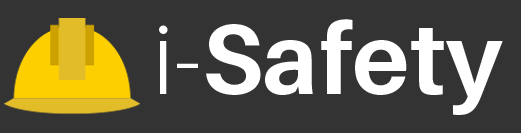
<style>
.page{position:relative;width:521px;height:133px;background:#333333}
.page>*{position:absolute;margin:0}
.t1{font:100px "Aileron-Bold";color:#ffffff}
.t2{font:100px "Aileron-Light";color:#ffffff}
</style>
<div class="page">
<p class="t1" style="left:159px;top:19px;width:344px;height:96px"><span class="t2">i-</span>Safety</p>
</div>
